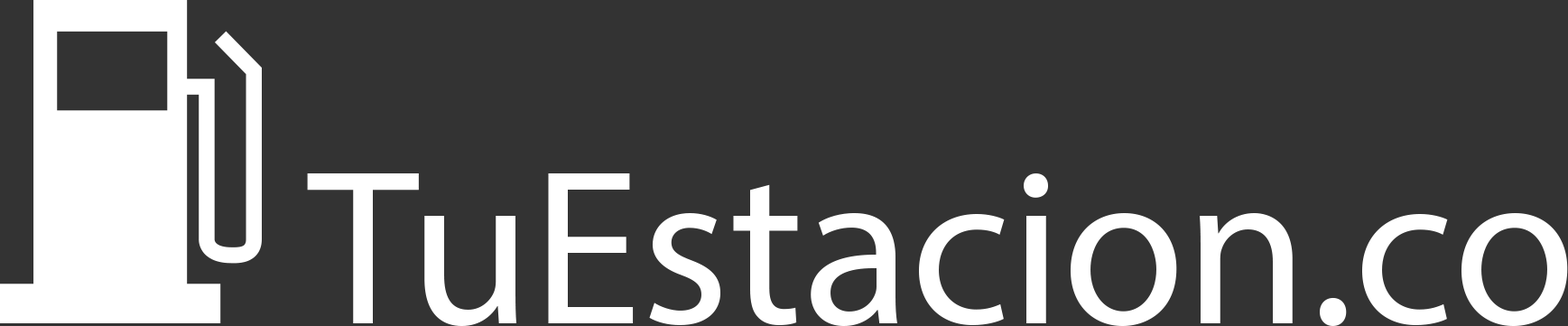
<style>
.page{position:relative;width:1568px;height:326px;background:#333333}
.page>*{position:absolute;margin:0}
.t1{font:222.6px "MyriadPro-Regular";color:#ffffff}
</style>
<div class="page">
<p class="t1" style="left:307px;top:173px;width:1261px;height:153px">TuEstacion.co</p>
</div>
